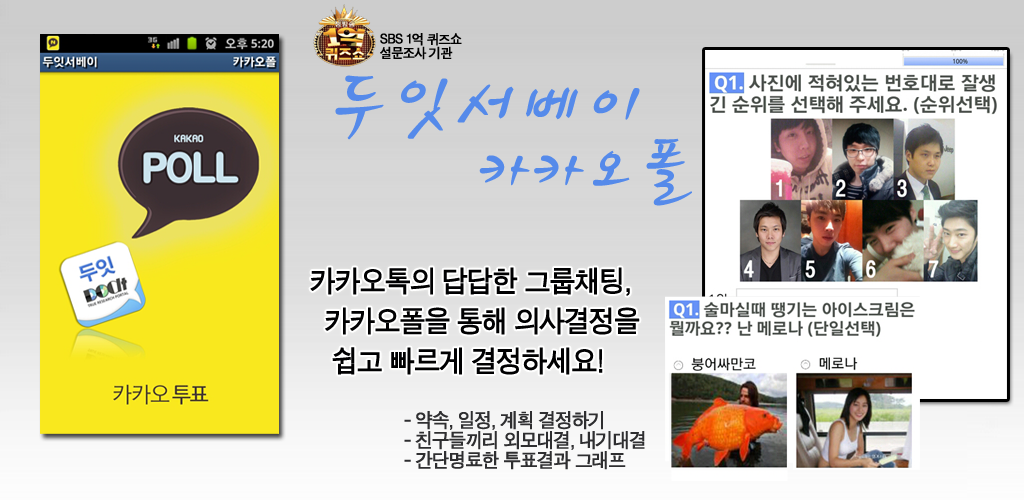
<style>
.page{position:relative;width:1024px;height:500px}
.page>*{position:absolute;margin:0}
.t1{font:13.8px/6.9px "SandTg";letter-spacing:-0.05em;color:#000000;font-weight:bold;scale:0.95 1}
.t2{font:86.5px "SJsoju2";letter-spacing:-0.05em;color:#558aea;font-weight:bold;scale:0.95 1}
.t3{font:73.2px "SJsoju2";letter-spacing:-0.05em;color:#558aea;font-weight:bold;scale:0.95 1}
.t4{font:30px/10px "SandTg";letter-spacing:-0.05em;color:#000001;font-weight:bold;scale:0.95 1}
.t5{font:20px/10px "SandTg";letter-spacing:-0.05em;color:#2e2e30;font-weight:bold;scale:0.95 1}
</style>
<div class="page">
<p class="t1" style="left:380px;top:33px;width:82px;height:27px">SBS 1억 퀴즈쇼<br><br>설문조사 기관</p>
<p class="t2" style="left:335px;top:75px;width:305px;height:65px">두잇서베이</p>
<p class="t3" style="left:479px;top:138px;width:213px;height:68px">카카오폴</p>
<p class="t4" style="left:310px;top:267px;width:330px;height:108px">카카오톡의 답답한 그룹채팅,<br><br><br><br>  카카오폴을 통해 의사결정을<br><br><br>        <br>   쉽고 빠르게 결정하세요!</p>
<p class="t5" style="left:404px;top:411px;width:241px;height:59px">- 약속, 일정, 계획 결정하기<br><br>- 친구들끼리 외모대결, 내기대결<br><br>- 간단명료한 투표결과 그래프</p>
</div>
